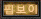
<style>
.page{position:relative;width:41px;height:19px}
.page>*{position:absolute;margin:0}
.t1{font:10px "NanumBarunGothic";letter-spacing:0.2em;color:#f6cc96;scale:1.11 1}
</style>
<div class="page">
<p class="t1" style="left:4px;top:5px;width:33px;height:10px">핍보이</p>
</div>
